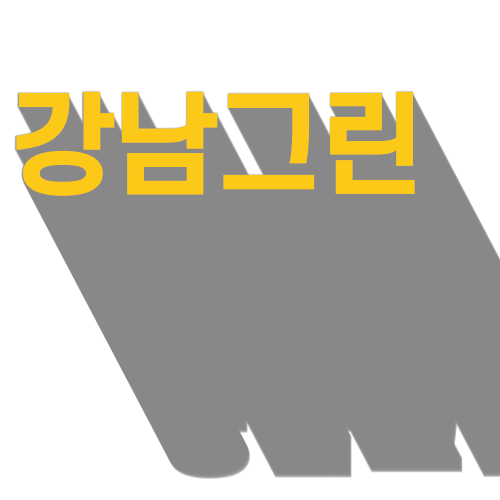
<style>
.page{position:relative;width:500px;height:500px;background:#888888}
.page>*{position:absolute;margin:0}
.t1{font:110px "S-CoreDream-7ExtraBold";letter-spacing:-0.02em;color:#fcc918}
</style>
<div class="page">
<p class="t1" style="left:16px;top:91px;width:399px;height:105px">강남그린</p>
</div>
